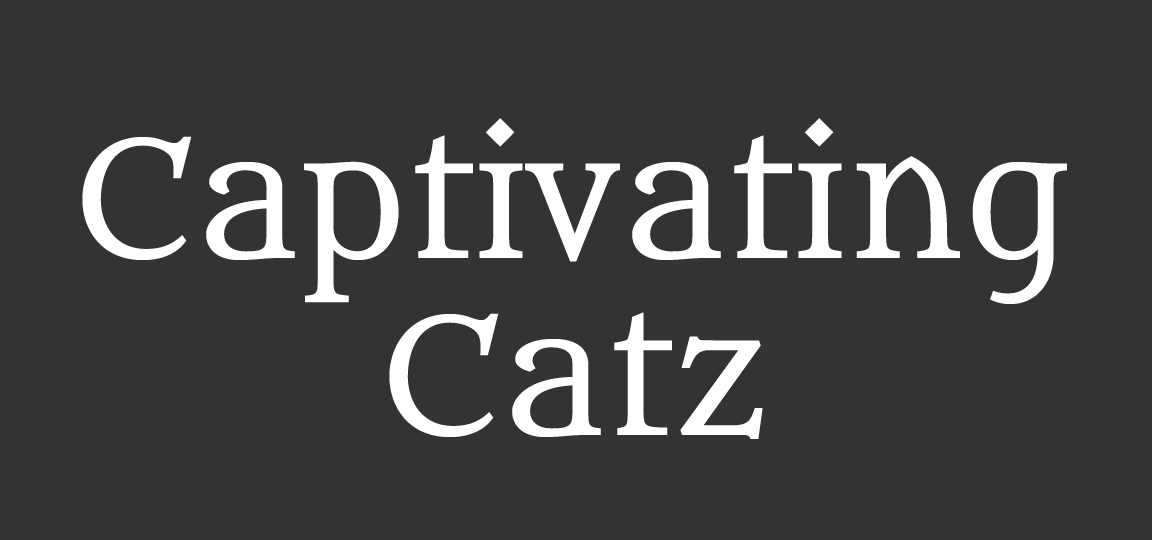
<style>
.page{position:relative;width:1152px;height:540px;background:#333333}
.page>*{position:absolute;margin:0}
.t1{font:160px/177px "Metamorphous";color:#ffffff}
</style>
<div class="page">
<p class="t1" style="left:82px;top:118px;width:985px;height:321px;text-align:center">Captivating<br>Catz</p>
</div>
